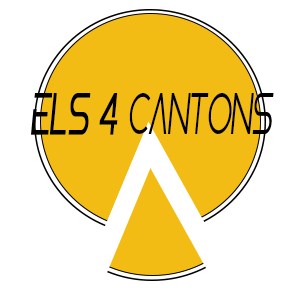
<style>
.page{position:relative;width:300px;height:300px;background:#ffffff}
.page>*{position:absolute;margin:0}
.t1{font:54.4px "Caxo";color:#000000;font-style:italic;scale:0.54 1}
.t2{font:54.4px "Caxo";color:#000000;font-weight:bold;font-style:italic;scale:0.54 1}
</style>
<div class="page">
<p class="t1" style="left:31px;top:93px;width:243px;height:42px"><span class="t2">ELS 4 </span>CANTONS</p>
</div>
